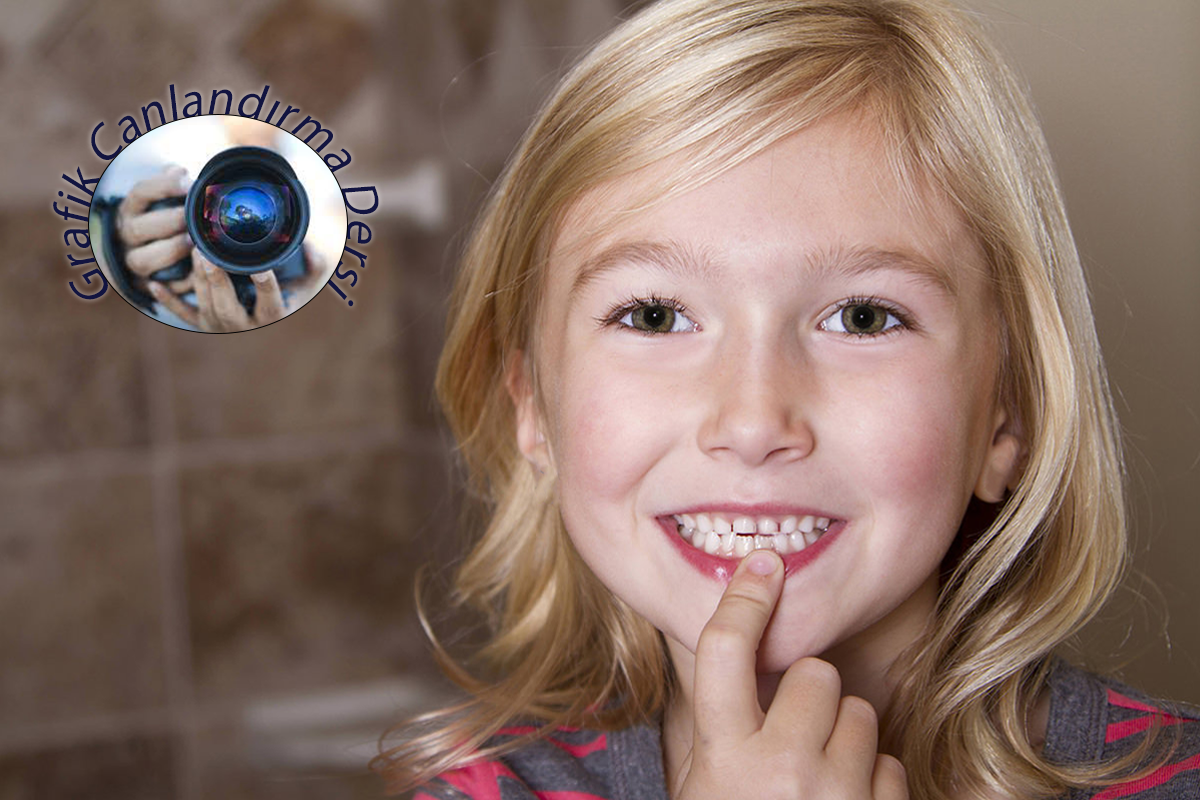
<style>
.page{position:relative;width:1200px;height:800px}
.page>*{position:absolute;margin:0}
.t1{font:50px "MyriadPro-Regular";color:#121440;font-style:italic}
</style>
<div class="page">
<p class="t1" style="left:53px;top:84px;width:326px;height:223px">Grafik Canlandırma Dersi</p>
</div>
